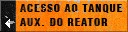
<style>
.page{position:relative;width:128px;height:32px}
.page>*{position:absolute;margin:0}
.t1{font:11px/14px "HelveticaLT-Condensed-Black";letter-spacing:0.08em;color:#000000}
</style>
<div class="page">
<p class="t1" style="left:20px;top:4px;width:102px;height:22px">ACESSO AO TANQUE<br>AUX. DO REATOR</p>
</div>
